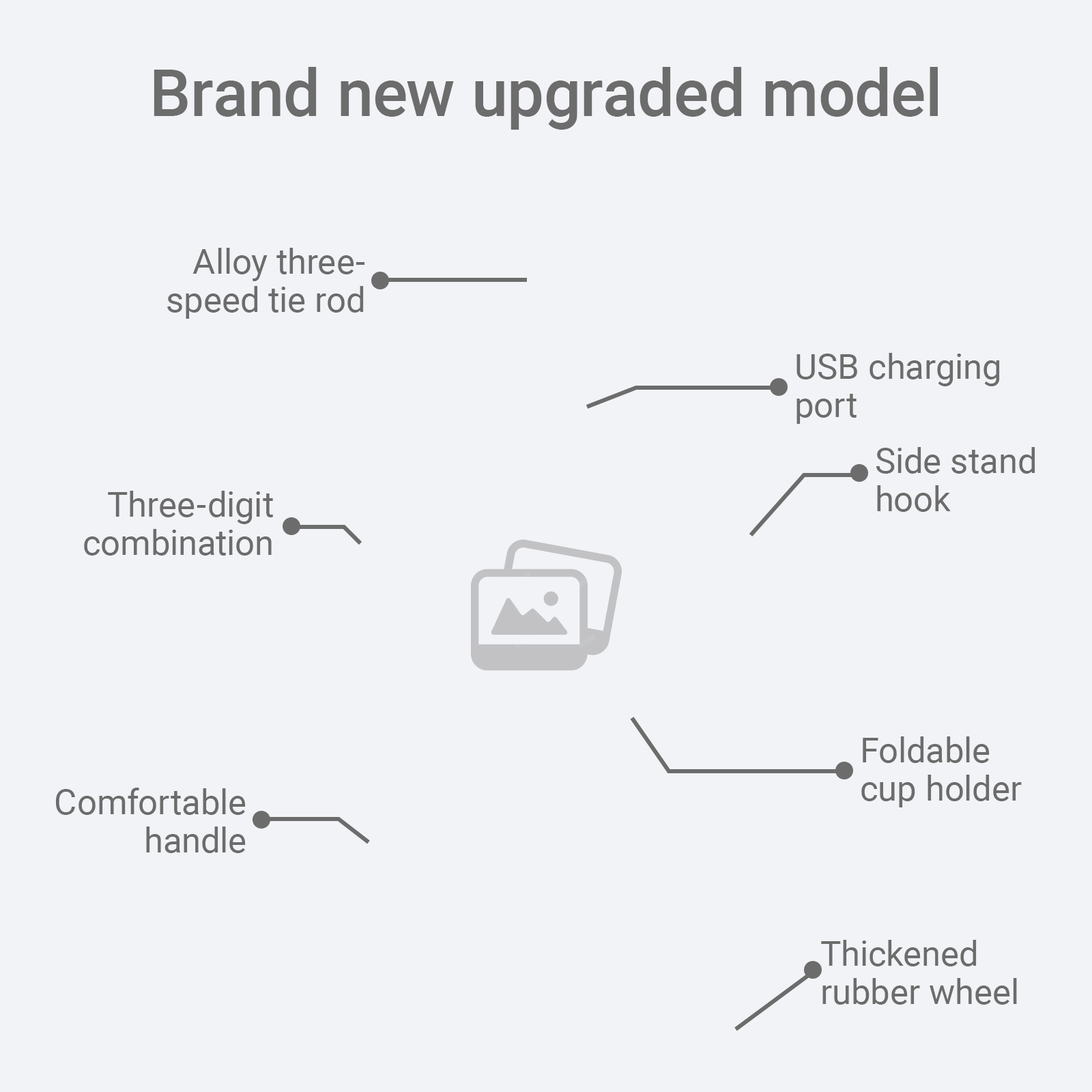
<style>
.page{position:relative;width:1092px;height:1092px;background:#f2f3f6}
.page>*{position:absolute;margin:0}
.t1{font:65.5px "Roboto-Medium";color:#6c6c6c}
.t2{font:34.9px/38.2px "Roboto-Regular";color:#6c6c6c}
</style>
<div class="page">
<p class="t1" style="left:154px;top:67px;width:784px;height:63px">Brand new upgraded model</p>
<p class="t2" style="left:167px;top:248px;width:198px;height:71px;text-align:right">Alloy three-<br>speed tie rod</p>
<p class="t2" style="left:796px;top:353px;width:204px;height:71px">USB charging <br>port</p>
<p class="t2" style="left:876px;top:447px;width:159px;height:65px">Side stand <br>hook</p>
<p class="t2" style="left:84px;top:491px;width:189px;height:65px;text-align:right">Three-digit<br> combination</p>
<p class="t2" style="left:861px;top:736px;width:161px;height:71px">Foldable <br>cup holder</p>
<p class="t2" style="left:56px;top:788px;width:190px;height:65px;text-align:right">Comfortable<br> handle</p>
<p class="t2" style="left:821px;top:940px;width:196px;height:65px">Thickened <br>rubber wheel</p>
</div>
